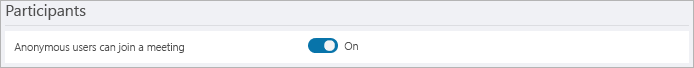
<style>
.page{position:relative;width:694px;height:68px;background:#f0f1f5}
.page>*{position:absolute;margin:0}
.t1{font:15.8px "SegoeUI";color:#505050}
.t2{font:10.8px "SegoeUI-Semilight";color:#505050}
</style>
<div class="page">
<p class="t1" style="left:6px;top:4px;width:80px;height:16px">Participants</p>
<p class="t2" style="left:14px;top:43px;width:170px;height:10px">Anonymous users can join a meeting</p>
<p class="t2" style="left:344px;top:42px;width:14px;height:8px">On</p>
</div>
